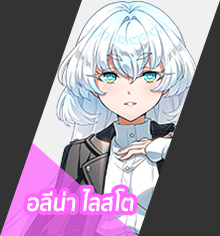
<style>
.page{position:relative;width:220px;height:236px;background:#333333}
.page>*{position:absolute;margin:0}
.t1{font:24.1px "SukhumvitSet-Bold";color:#ffffff;scale:0.9 1}
</style>
<div class="page">
<p class="t1" style="left:27px;top:188px;width:107px;height:24px">อลีน่า ไลสโต</p>
</div>
